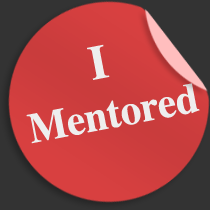
<style>
.page{position:relative;width:210px;height:210px;background:#333333}
.page>*{position:absolute;margin:0}
.t1{font:42.2px "Times-Bold";color:#eeeeee}
.t2{font:48px "Times-Bold";color:#eeeeee}
</style>
<div class="page">
<p class="t1" style="left:26px;top:44px;width:174px;height:100px;text-align:center;rotate:-11deg"><span class="t2">I</span> <br>Mentored</p>
</div>
